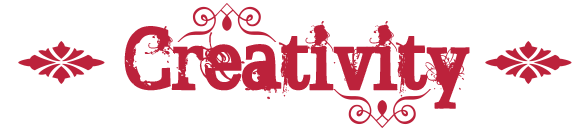
<style>
.page{position:relative;width:588px;height:131px;background:#ffffff}
.page>*{position:absolute;margin:0}
.t1{font:100px "SoftOrnamentsFourteen";color:#bc223b}
.t2{font:72px "BROKENGHOST";color:#bc223b}
.t3{font:72px "SoftOrnamentsFourteen";color:#bc223b}
</style>
<div class="page">
<p class="t1" style="left:177px;top:3px;width:100px;height:39px">a</p>
<p class="t2" style="left:124px;top:21px;width:346px;height:88px">Creativity</p>
<p class="t1" style="left:18px;top:41px;width:87px;height:43px">q</p>
<p class="t1" style="left:485px;top:41px;width:87px;height:43px"><span class="t3"><br>                </span>q</p>
<p class="t1" style="left:333px;top:89px;width:99px;height:39px">U</p>
</div>
